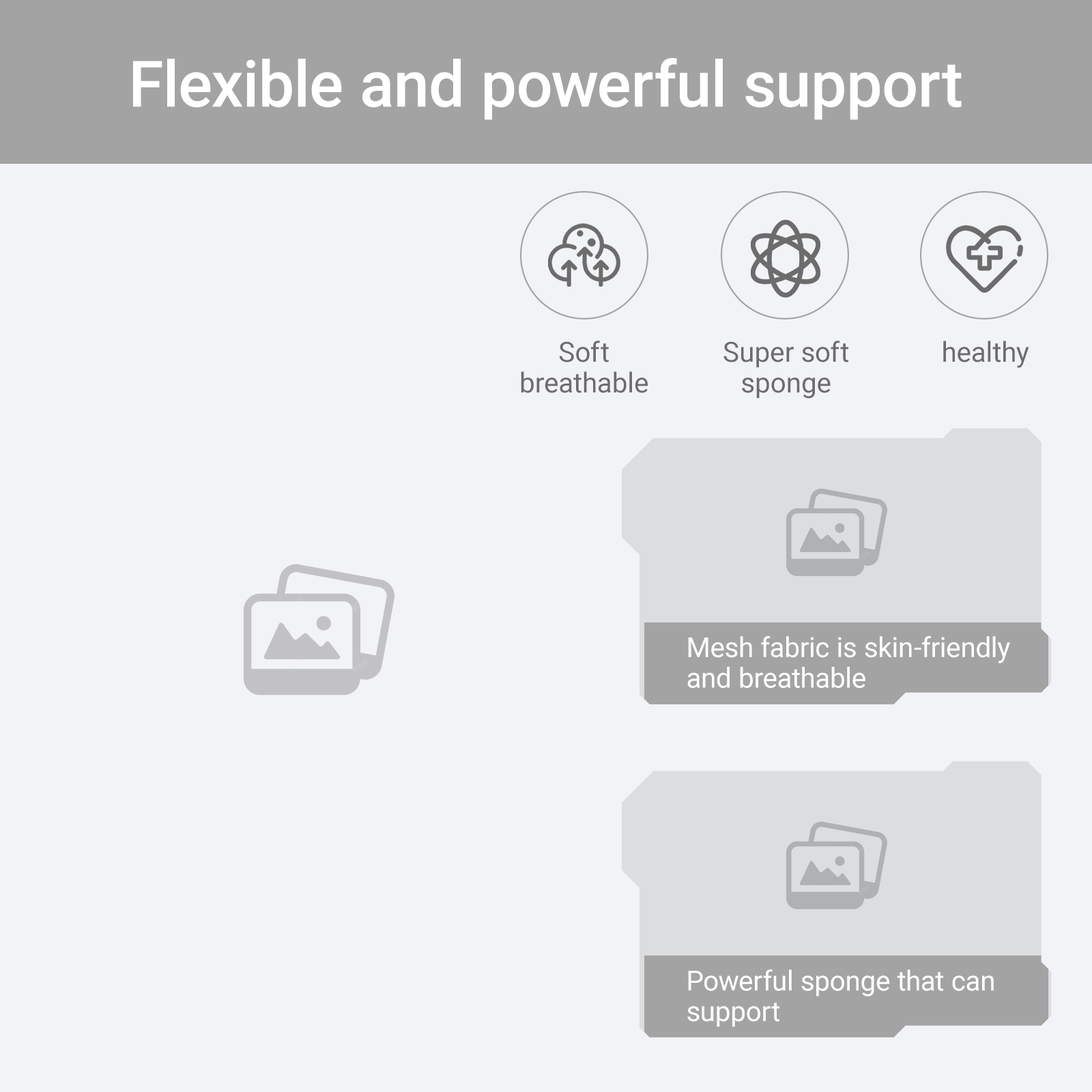
<style>
.page{position:relative;width:1092px;height:1092px;background:#f2f3f6}
.page>*{position:absolute;margin:0}
.t1{font:64.1px "Roboto-Medium";color:#ffffff}
.t2{font:27.7px/30.6px "Roboto-Regular";color:#6c6c6c}
.t3{font:27.7px "Roboto-Regular";color:#6c6c6c}
.t4{font:27.7px/30.6px "Roboto-Regular";color:#ffffff}
</style>
<div class="page">
<p class="t1" style="left:133px;top:58px;width:829px;height:62px">Flexible and powerful support</p>
<p class="t2" style="left:521px;top:341px;width:127px;height:52px;text-align:center">Soft<br>breathable</p>
<p class="t2" style="left:723px;top:341px;width:125px;height:58px;text-align:center">Super soft<br>sponge</p>
<p class="t3" style="left:943px;top:341px;width:86px;height:27px">healthy</p>
<p class="t4" style="left:687px;top:636px;width:323px;height:52px">Mesh fabric is skin-friendly and breathable</p>
<p class="t4" style="left:687px;top:969px;width:307px;height:58px">Powerful sponge that can support</p>
</div>
